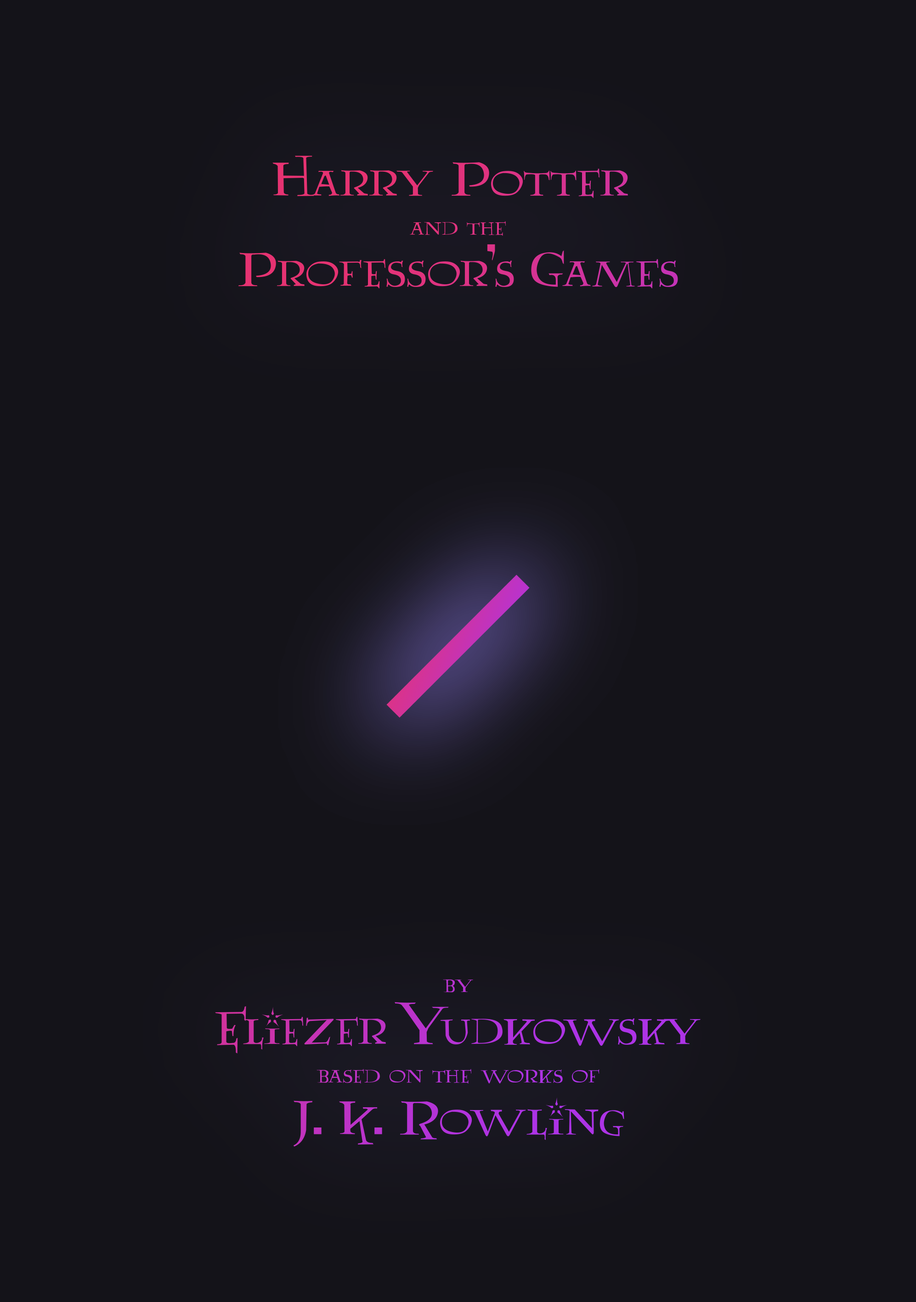
<style>
.page{position:relative;width:916px;height:1302px;background:#141319}
.page>*{position:absolute;margin:0}
.t1{font:55.1px/51.5px "Lumos";color:#e1337d}
.t2{font:27.6px/38.9px "Lumos";color:#e1337d}
.t3{font:27.6px/38.9px "Lumos";color:#b533d5}
.t4{font:27.6px/706.4px "Lumos";color:#b533d5}
.t5{font:55.1px/51.5px "Lumos";color:#b533d5}
</style>
<div class="page">
<p class="t1" style="left:238px;top:156px;width:440px;height:132px;text-align:center">Harry Potter <br><span class="t2">and the<br></span>Professor's Games</p>
<p class="t3" style="left:215px;top:979px;width:485px;height:168px;text-align:center"><span class="t4">by<br></span><span class="t5">Eliezer Yudkowsky<br></span>based on the works of<br><span class="t5">J. K. Rowling</span></p>
</div>
